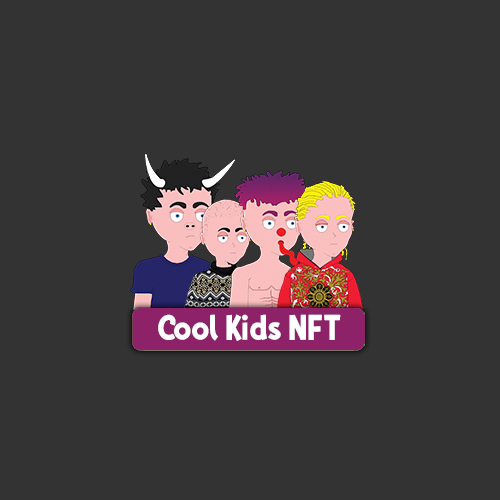
<style>
.page{position:relative;width:500px;height:500px;background:#333333}
.page>*{position:absolute;margin:0}
.t1{font:36px "HUBBYBUNNY";color:#ffffff}
</style>
<div class="page">
<p class="t1" style="left:158px;top:314px;width:183px;height:27px">Cool Kids NFT</p>
</div>
